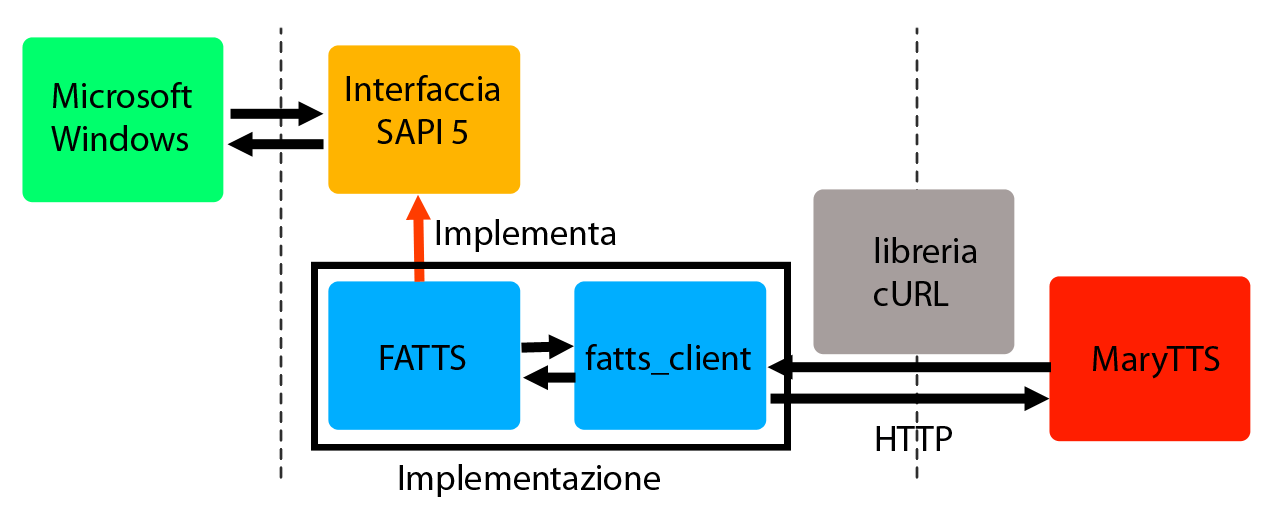
<style>
.page{position:relative;width:1286px;height:508px;background:#ffffff}
.page>*{position:absolute;margin:0}
.t1{font:36px "MyriadPro-Regular";color:#000000}
.t2{font:36px "MyriadPro-Regular";color:#000001}
</style>
<div class="page">
<p class="t1" style="left:346px;top:75px;width:154px;height:69px;text-align:center">Interfaccia<br>SAPI 5</p>
<p class="t1" style="left:51px;top:82px;width:141px;height:69px">Microsoft<br>Windows</p>
<p class="t1" style="left:436px;top:219px;width:180px;height:33px">Implementa</p>
<p class="t1" style="left:874px;top:237px;width:103px;height:69px">libreria<br>cURL</p>
<p class="t1" style="left:380px;top:345px;width:86px;height:25px">FATTS</p>
<p class="t1" style="left:585px;top:344px;width:166px;height:31px">fatts_client</p>
<p class="t1" style="left:1093px;top:346px;width:127px;height:33px">MaryTTS</p>
<p class="t2" style="left:876px;top:426px;width:76px;height:25px">HTTP</p>
<p class="t1" style="left:399px;top:464px;width:261px;height:33px">Implementazione</p>
</div>
